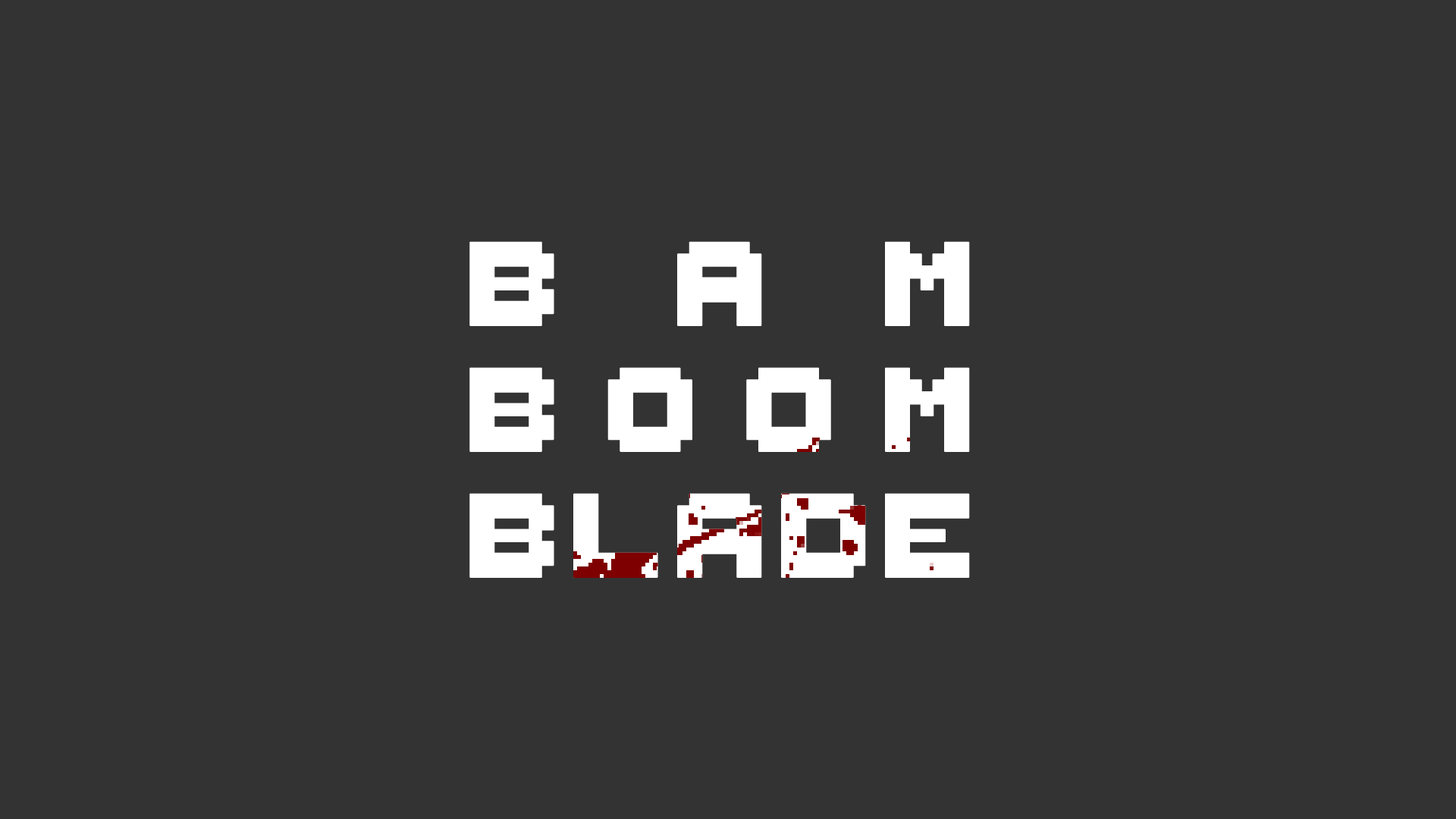
<style>
.page{position:relative;width:1456px;height:819px;background:#333333}
.page>*{position:absolute;margin:0}
.t1{font:189.6px/125.9px "ThaleahFat";color:#ffffff;font-weight:bold}
</style>
<div class="page">
<p class="t1" style="left:469px;top:241px;width:501px;height:337px;text-align:justify">Bam<br>BooM<br>Blade</p>
</div>
